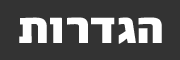
<style>
.page{position:relative;width:180px;height:60px;background:#333333}
.page>*{position:absolute;margin:0}
.t1{font:52.7px "FbAlbatros-Black";color:#ffffff}
</style>
<div class="page">
<p class="t1" style="left:19px;top:17px;width:143px;height:27px">הגדרות</p>
</div>
